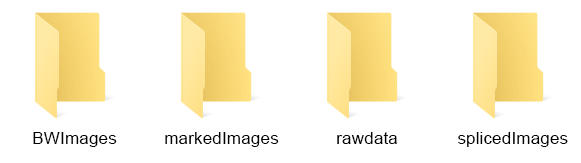
<style>
.page{position:relative;width:581px;height:163px;background:#ffffff}
.page>*{position:absolute;margin:0}
.t1{font:17.3px "ArialMT";color:#000000}
</style>
<div class="page">
<p class="t1" style="left:33px;top:132px;width:84px;height:15px">BWImages</p>
<p class="t1" style="left:165px;top:132px;width:114px;height:15px">markedImages</p>
<p class="t1" style="left:337px;top:132px;width:60px;height:12px">rawdata</p>
<p class="t1" style="left:458px;top:132px;width:110px;height:15px">splicedImages</p>
</div>
